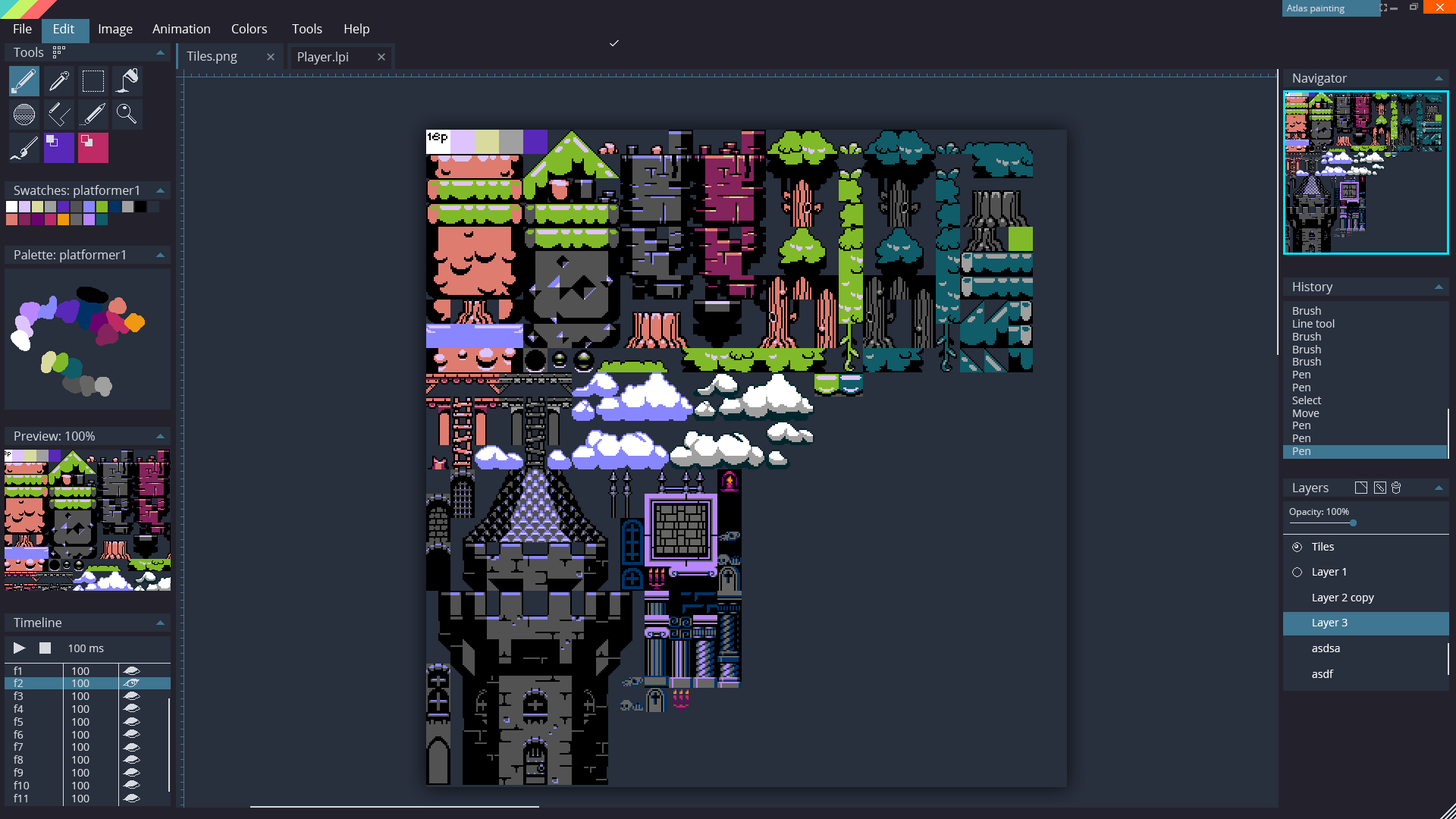
<style>
.page{position:relative;width:1456px;height:819px;background:#282f3d}
.page>*{position:absolute;margin:0}
.t1{font:9.1px "OpenSans";color:#d6d9df}
.t2{font:12.1px "OpenSans";color:#ffffff}
.t3{font:12.1px "OpenSans";color:#d6d9df}
.t4{font:10.6px "OpenSans";color:#d6d9df}
.t5{font:10.6px "OpenSans";color:#ffffff}
</style>
<div class="page">
<p class="t1" style="left:1287px;top:5px;width:58px;height:9px">Atlas painting</p>
<p class="t2" style="left:14px;top:24px;width:355px;height:12px">File      Edit   Image  Animation Colors   Tools   Help</p>
<p class="t3" style="left:14px;top:47px;width:30px;height:10px">Tools</p>
<p class="t3" style="left:187px;top:51px;width:50px;height:13px">Tiles.png</p>
<p class="t3" style="left:298px;top:52px;width:50px;height:12px">Player.lpi</p>
<p class="t3" style="left:1293px;top:74px;width:55px;height:12px">Navigator</p>
<p class="t3" style="left:14px;top:185px;width:125px;height:13px">Swatches: platformer1</p>
<p class="t3" style="left:14px;top:249px;width:111px;height:13px">Palette: platformer1</p>
<p class="t3" style="left:1293px;top:282px;width:40px;height:12px">History</p>
<p class="t4" style="left:1292px;top:306px;width:43px;height:149px">Brush<br>Line tool<br>Brush<br>Brush<br>Brush<br>Pen<br>Pen<br>Select<br>Move<br>Pen<br>Pen<br>Pen</p>
<p class="t3" style="left:14px;top:431px;width:81px;height:10px">Preview: 100%</p>
<p class="t3" style="left:1293px;top:483px;width:36px;height:12px">Layers</p>
<p class="t1" style="left:1289px;top:508px;width:60px;height:9px">Opacity: 100%</p>
<p class="t5" style="left:1312px;top:542px;width:62px;height:136px">Tiles<br><br>Layer 1<br><br>Layer 2 copy<br><br>Layer 3<br><br>asdsa<br><br>asdf</p>
<p class="t3" style="left:14px;top:617px;width:47px;height:10px">Timeline</p>
<p class="t4" style="left:68px;top:645px;width:36px;height:7px">100 ms</p>
<p class="t4" style="left:14px;top:667px;width:16px;height:135px">f1<br>f2<br>f3<br>f4<br>f5<br>f6<br>f7<br>f8<br>f9<br>f10<br>f11</p>
<p class="t4" style="left:72px;top:667px;width:17px;height:135px">100<br>100<br>100<br>100<br>100<br>100<br>100<br>100<br>100<br>100<br>100</p>
</div>
